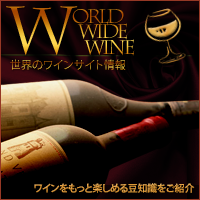
<style>
.page{position:relative;width:200px;height:200px;background:#000000}
.page>*{position:absolute;margin:0}
.t1{font:65px "CharlemagneStd-Regular";letter-spacing:-0.135em}
.t2{font:19.5px/15.6px "CharlemagneStd-Regular";letter-spacing:-0.135em}
.t3{font:11px "KozGoPro-Light";letter-spacing:0.01em}
.t4{font:10px "KozGoPro-Bold";letter-spacing:-0.025em}
</style>
<div class="page">
<p class="t1" style="left:6px;top:6px;width:72px;height:50px">W</p>
<p class="t2" style="left:72px;top:9px;width:63px;height:47px">orld <br>  wide <br>    wine</p>
<p class="t3" style="left:10px;top:59px;width:116px;height:11px">世界のワインサイト情報</p>
<p class="t4" style="left:34px;top:183px;width:161px;height:10px">ワインをもっと楽しめる豆知識をご紹介</p>
</div>
